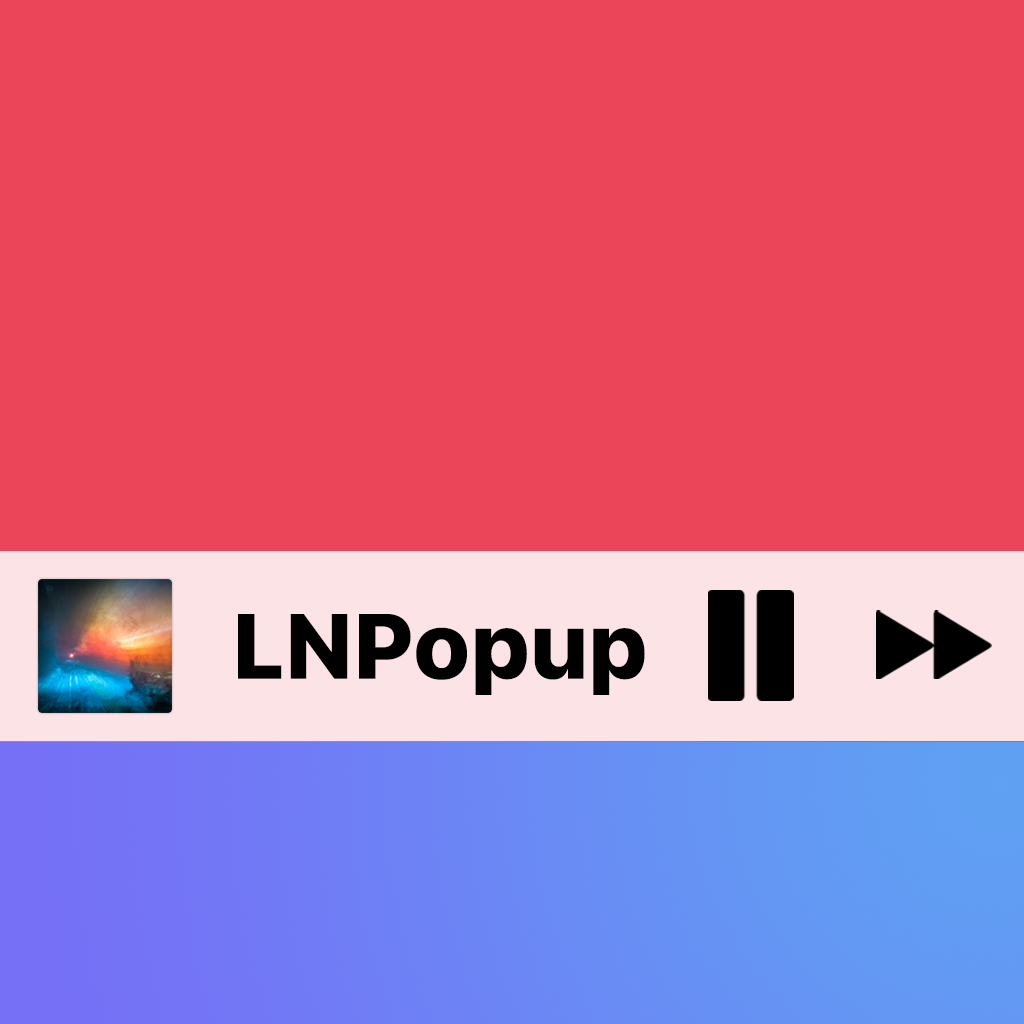
<style>
.page{position:relative;width:1024px;height:1024px;background:#ea4559}
.page>*{position:absolute;margin:0}
.t1{font:92px "SFUIDisplay-Heavy";letter-spacing:0.02em;color:#000000}
</style>
<div class="page">
<p class="t1" style="left:238px;top:614px;width:407px;height:81px">LNPopup</p>
</div>
